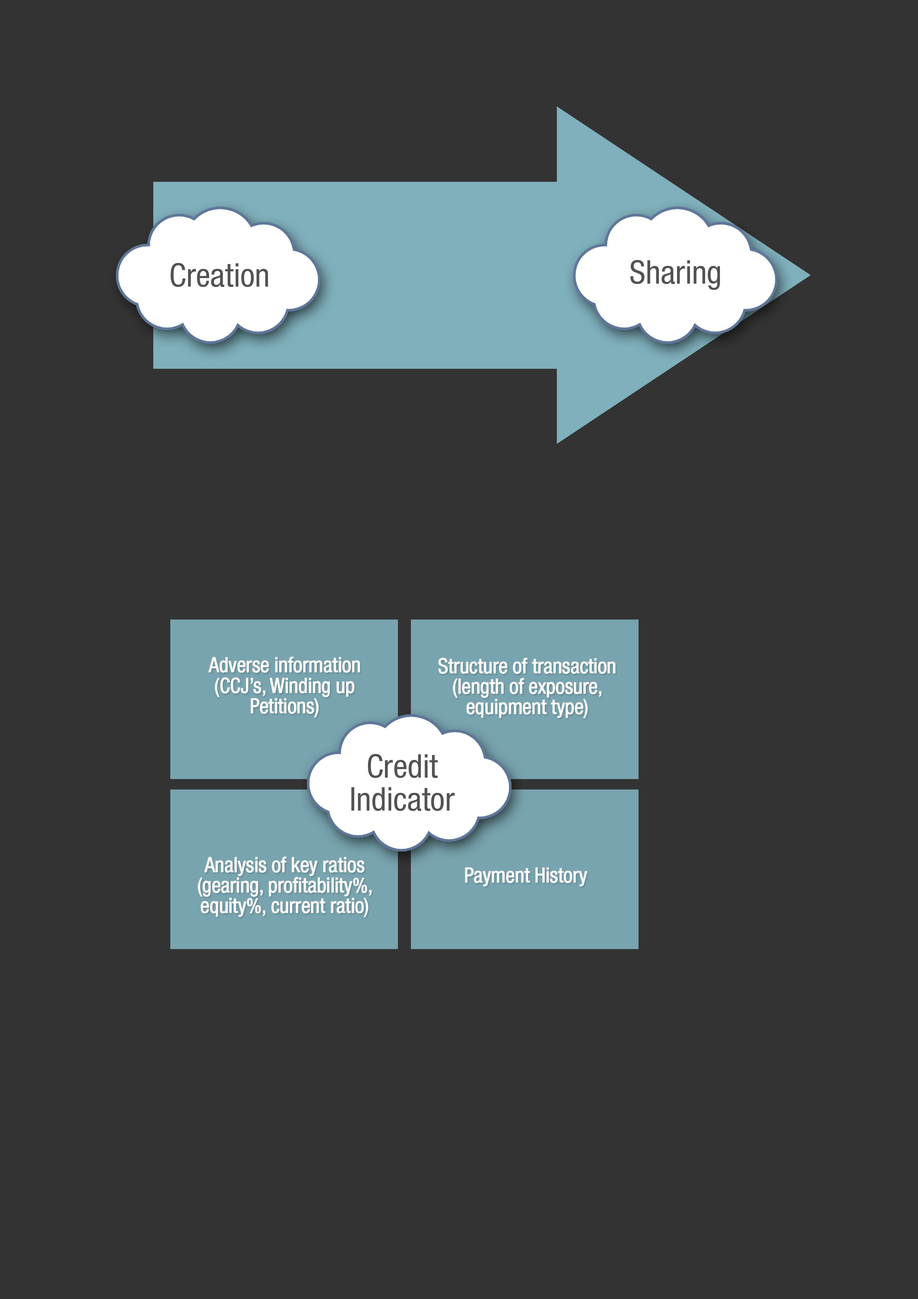
<style>
.page{position:relative;width:918px;height:1299px;background:#333333}
.page>*{position:absolute;margin:0}
.t1{font:32.7px "HelveticaNeueLTPro-Cn";color:#525252}
.t2{font:20.5px/20.5px "HelveticaNeueLTPro-Cn";color:#ffffff}
.t3{font:32.7px/32.7px "HelveticaNeueLTPro-Cn";color:#525252}
.t4{font:20.5px "HelveticaNeueLTPro-Cn";color:#ffffff}
</style>
<div class="page">
<p class="t1" style="left:171px;top:263px;width:97px;height:24px">Creation</p>
<p class="t1" style="left:630px;top:260px;width:90px;height:30px">Sharing</p>
<p class="t2" style="left:208px;top:657px;width:152px;height:60px;text-align:center">Adverse information<br>(CCJ’s, Winding up<br>Petitions)</p>
<p class="t2" style="left:439px;top:658px;width:176px;height:60px;text-align:center">Structure of transaction<br>(length of exposure,<br>equipment type)</p>
<p class="t3" style="left:351px;top:754px;width:104px;height:57px;text-align:center">Credit<br>Indicator</p>
<p class="t2" style="left:198px;top:857px;width:173px;height:60px;text-align:center">Analysis of key ratios<br>(gearing, profitability%,<br>equity%, current ratio)</p>
<p class="t4" style="left:465px;top:867px;width:122px;height:19px">Payment History</p>
</div>
